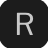
<style>
.page{position:relative;width:48px;height:48px;background:#1c1c1c}
.page>*{position:absolute;margin:0}
.t1{font:30px "LibreFranklin-Regular";color:#c9c9c9}
</style>
<div class="page">
<p class="t1" style="left:16px;top:12px;width:18px;height:23px">R</p>
</div>
